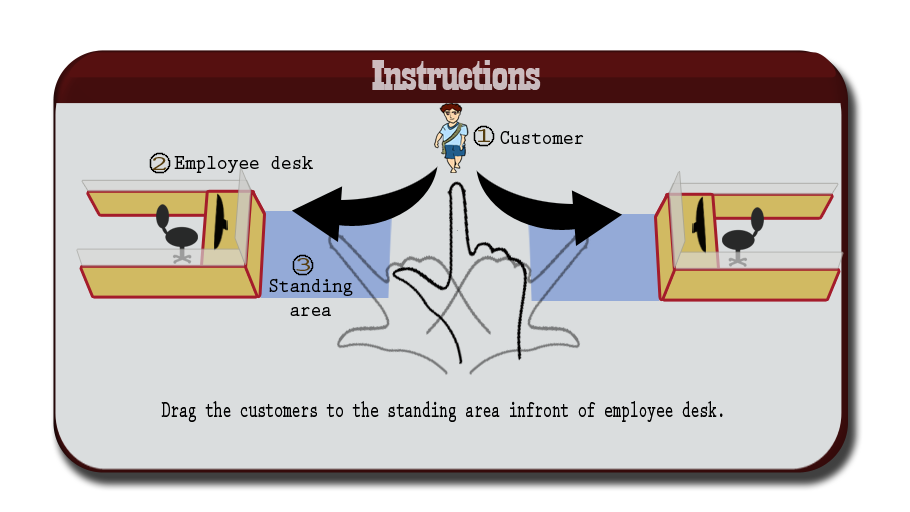
<style>
.page{position:relative;width:910px;height:512px;background:#daddde}
.page>*{position:absolute;margin:0}
.t1{font:44.6px "Playbill";letter-spacing:-0.025em;color:#c8bbbe;scale:1.61 1}
.t2{font:20.9px "PrestigeEliteStd-Bd";letter-spacing:-0.025em;color:#563e10;scale:1.7 1}
.t3{font:20.2px "PrestigeEliteStd-Bd";letter-spacing:-0.025em;color:#010101;scale:0.91 1}
.t4{font:24px "PrestigeEliteStd-Bd";letter-spacing:-0.025em;color:#010101;scale:0.63 1}
</style>
<div class="page">
<p class="t1" style="left:372px;top:60px;width:169px;height:30px">Instructions</p>
<p class="t2" style="left:478px;top:129px;width:12px;height:13px">1</p>
<p class="t3" style="left:500px;top:131px;width:84px;height:13px">Customer</p>
<p class="t2" style="left:152px;top:157px;width:15px;height:13px">2</p>
<p class="t3" style="left:174px;top:156px;width:139px;height:17px">Employee desk</p>
<p class="t2" style="left:296px;top:258px;width:14px;height:13px">3</p>
<p class="t3" style="left:269px;top:278px;width:84px;height:38px;text-align:center">Standing<br>area</p>
<p class="t4" style="left:161px;top:401px;width:562px;height:21px">Drag the customers to the standing area infront of employee desk.</p>
</div>
